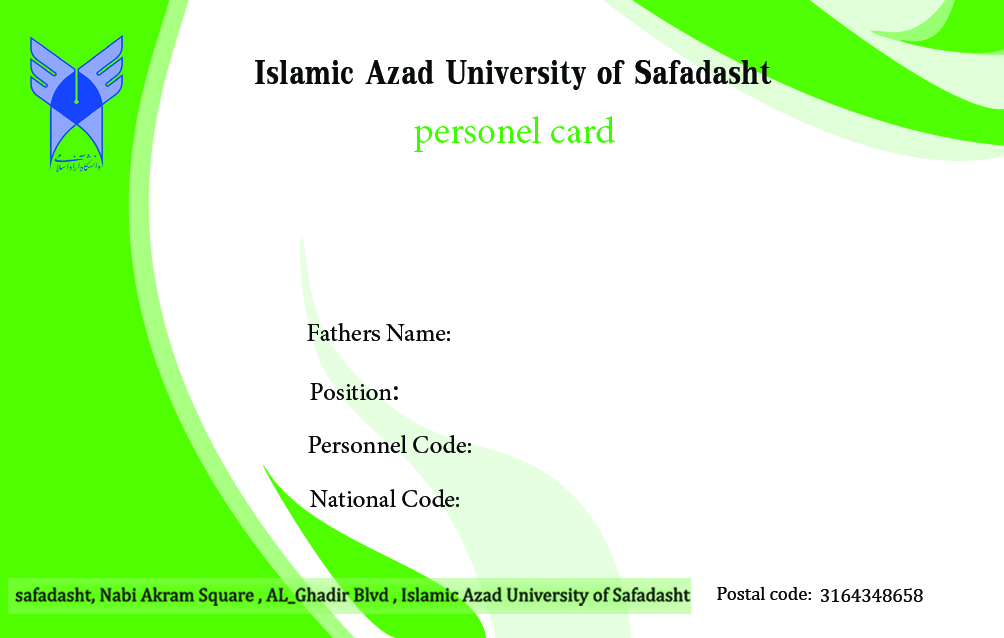
<style>
.page{position:relative;width:1004px;height:638px;background:#ffffff}
.page>*{position:absolute;margin:0}
.t1{font:50px "KodchiangUPCBold";color:#090b0c}
.t2{font:37.5px "MinionPro-Regular";color:#3ffb00}
.t3{font:25px "MinionPro-Medium";color:#090a0b}
.t4{font:25px "MinionPro-Regular";color:#090a0b}
.t5{font:33.3px "MinionPro-Regular";color:#090a0b}
.t6{font:18.7px "Cambria";color:#080a0b}
.t7{font:18.8px "Cambria";color:#070a0a}
</style>
<div class="page">
<p class="t1" style="left:255px;top:60px;width:517px;height:30px">Islamic Azad University of Safadasht</p>
<p class="t2" style="left:414px;top:116px;width:201px;height:36px">personel card</p>
<p class="t3" style="left:307px;top:323px;width:143px;height:18px">Fathers Name:</p>
<p class="t4" style="left:310px;top:383px;width:88px;height:17px"><span class="t5">  :</span>Position</p>
<p class="t3" style="left:308px;top:435px;width:163px;height:18px">:Personnel Code</p>
<p class="t4" style="left:310px;top:489px;width:149px;height:19px">:National Code</p>
<p class="t6" style="left:717px;top:587px;width:94px;height:13px">:Postal code</p>
<p class="t7" style="left:821px;top:588px;width:102px;height:14px">3164348658</p>
</div>
